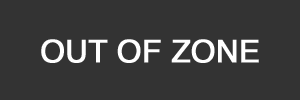
<style>
.page{position:relative;width:300px;height:100px;background:#333333}
.page>*{position:absolute;margin:0}
.t1{font:31px "Helvetica";color:#ffffff;font-weight:bold}
</style>
<div class="page">
<p class="t1" style="left:41px;top:39px;width:218px;height:24px">OUT OF ZONE</p>
</div>
